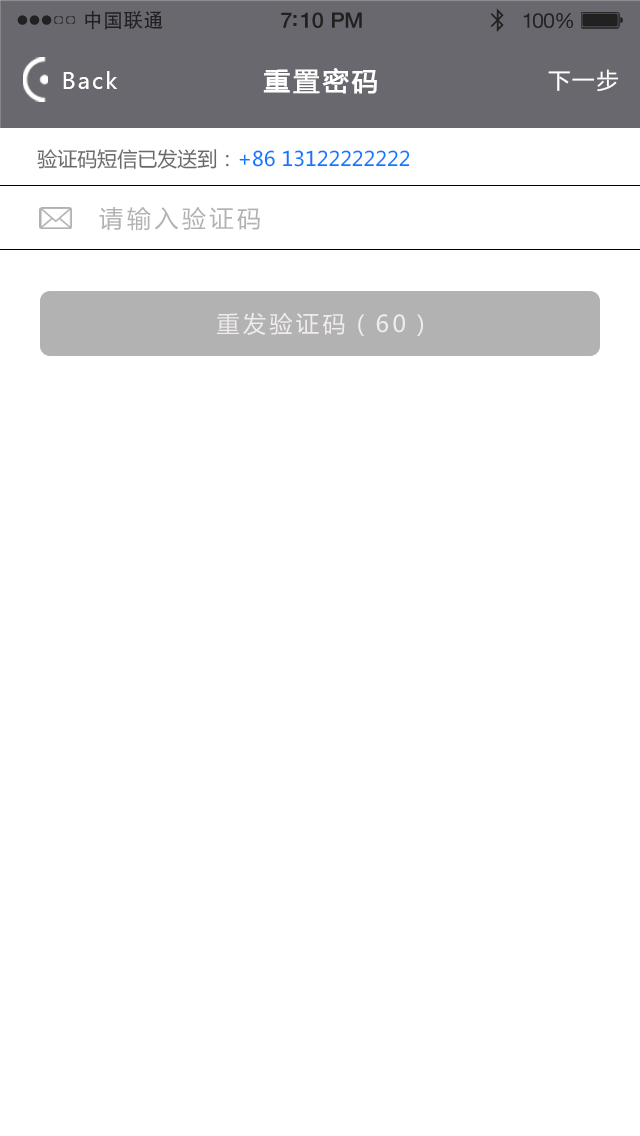
<style>
.page{position:relative;width:640px;height:1136px;background:#ffffff}
.page>*{position:absolute;margin:0}
.t1{font:19.7px "AdobeHeitiStd-Regular";letter-spacing:0.02em;color:#212121}
.t2{font:21.4px "HelveticaNeue-Medium";letter-spacing:-0.02em;color:#212121}
.t3{font:20.6px "HelveticaNeue";letter-spacing:-0.02em;color:#212121}
.t4{font:22px "MicrosoftYaHei";letter-spacing:0.1em;color:#ffffff}
.t5{font:26px "MicrosoftYaHei";letter-spacing:0.1em;color:#ffffff;font-weight:bold}
.t6{font:20px "MicrosoftYaHei";color:#0c79ff}
.t7{font:20px "MicrosoftYaHei";color:#6a6a6a}
.t8{font:24px "MicrosoftYaHei";letter-spacing:0.15em;color:#b2b2b2}
.t9{font:23px "MicrosoftYaHei";letter-spacing:0.15em;color:#f0ecec}
</style>
<div class="page">
<p class="t1" style="left:85px;top:10px;width:78px;height:20px">中国联通</p>
<p class="t2" style="left:281px;top:12px;width:81px;height:16px">7:10 PM</p>
<p class="t3" style="left:523px;top:13px;width:50px;height:16px">100%</p>
<p class="t4" style="left:63px;top:71px;width:55px;height:18px">Back</p>
<p class="t5" style="left:263px;top:68px;width:114px;height:26px">重置密码</p>
<p class="t4" style="left:548px;top:69px;width:71px;height:23px">下一步</p>
<p class="t6" style="left:37px;top:149px;width:373px;height:20px"><span class="t7">验证码短信已发送到：</span>+86 13122222222</p>
<p class="t8" style="left:99px;top:207px;width:161px;height:24px">请输入验证码</p>
<p class="t9" style="left:217px;top:312px;width:206px;height:24px">重发验证码（60）</p>
</div>
